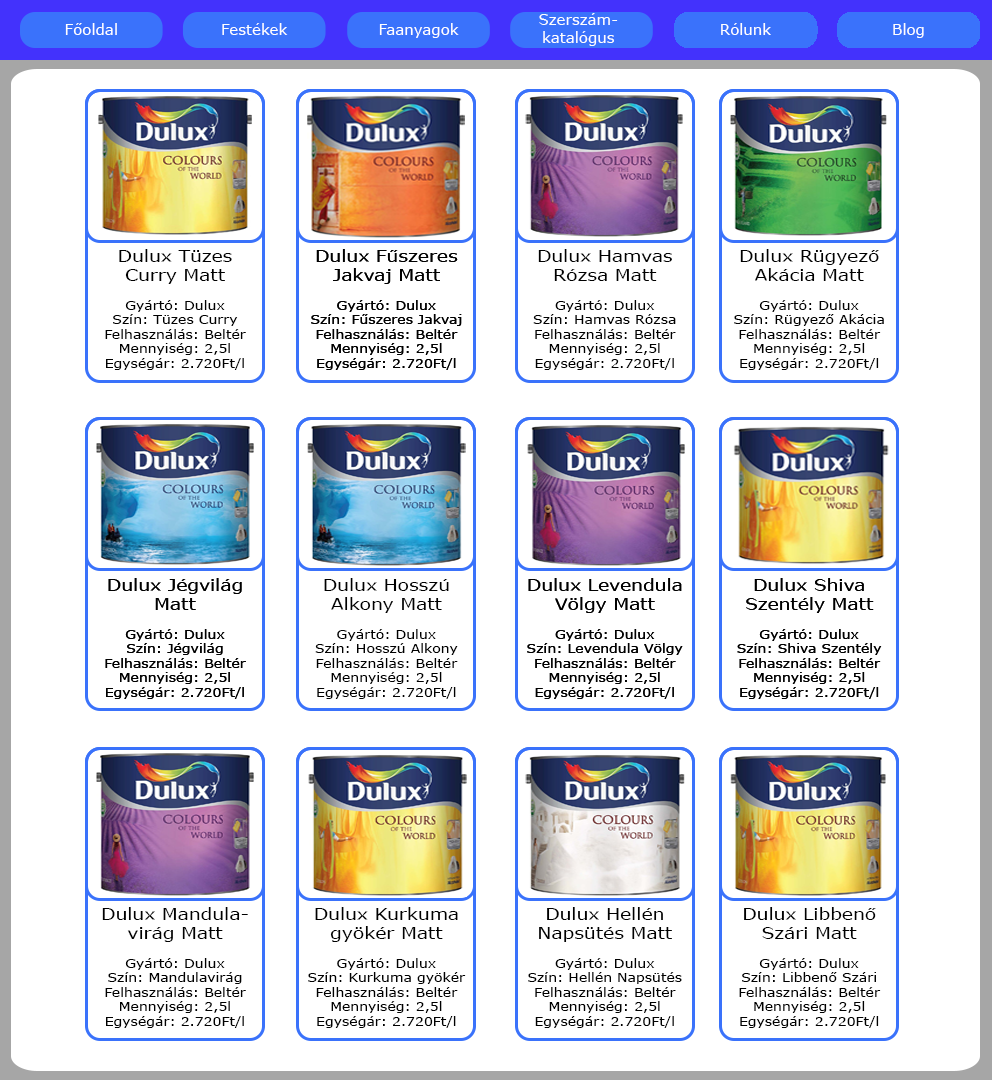
<style>
.page{position:relative;width:992px;height:1080px;background:#ffffff}
.page>*{position:absolute;margin:0}
.t1{font:12px "Verdana";color:#000000;scale:1.17 1}
.t2{font:16px "Verdana";color:#000000;scale:1.17 1}
</style>
<div class="page">
<p class="t1" style="left:105px;top:249px;width:141px;height:121px;text-align:center"><span class="t2">Dulux Tüzes Curry Matt<br></span><br>Gyártó: Dulux<br>Szín: Tüzes Curry<br>Felhasználás: Beltér<br>Mennyiség: 2,5l<br>Egységár: 2.720Ft/l</p>
<p class="t1" style="left:311px;top:249px;width:151px;height:121px;text-align:center"><span class="t2">Dulux Fűszeres Jakvaj Matt<br></span><br>Gyártó: Dulux<br>Szín: Fűszeres Jakvaj<br>Felhasználás: Beltér<br>Mennyiség: 2,5l<br>Egységár: 2.720Ft/l</p>
<p class="t1" style="left:311px;top:249px;width:151px;height:121px;text-align:center"><span class="t2">Dulux Fűszeres Jakvaj Matt<br></span><br>Gyártó: Dulux<br>Szín: Fűszeres Jakvaj<br>Felhasználás: Beltér<br>Mennyiség: 2,5l<br>Egységár: 2.720Ft/l</p>
<p class="t1" style="left:533px;top:249px;width:143px;height:121px;text-align:center"><span class="t2">Dulux Hamvas Rózsa Matt<br></span><br>Gyártó: Dulux<br>Szín: Hamvas Rózsa<br>Felhasználás: Beltér<br>Mennyiség: 2,5l<br>Egységár: 2.720Ft/l</p>
<p class="t1" style="left:734px;top:249px;width:150px;height:121px;text-align:center"><span class="t2">Dulux Rügyező Akácia Matt<br></span><br>Gyártó: Dulux<br>Szín: Rügyező Akácia<br>Felhasználás: Beltér<br>Mennyiség: 2,5l<br>Egységár: 2.720Ft/l</p>
<p class="t1" style="left:105px;top:578px;width:141px;height:121px;text-align:center"><span class="t2">Dulux Jégvilág Matt<br></span><br>Gyártó: Dulux<br>Szín: Jégvilág<br>Felhasználás: Beltér<br>Mennyiség: 2,5l<br>Egységár: 2.720Ft/l</p>
<p class="t1" style="left:105px;top:578px;width:141px;height:121px;text-align:center"><span class="t2">Dulux Jégvilág Matt<br></span><br>Gyártó: Dulux<br>Szín: Jégvilág<br>Felhasználás: Beltér<br>Mennyiség: 2,5l<br>Egységár: 2.720Ft/l</p>
<p class="t1" style="left:315px;top:578px;width:143px;height:121px;text-align:center"><span class="t2">Dulux Hosszú Alkony Matt<br></span><br>Gyártó: Dulux<br>Szín: Hosszú Alkony<br>Felhasználás: Beltér<br>Mennyiség: 2,5l<br>Egységár: 2.720Ft/l</p>
<p class="t1" style="left:527px;top:578px;width:156px;height:121px;text-align:center"><span class="t2">Dulux Levendula Völgy Matt<br></span><br>Gyártó: Dulux<br>Szín: Levendula Völgy<br>Felhasználás: Beltér<br>Mennyiség: 2,5l<br>Egységár: 2.720Ft/l</p>
<p class="t1" style="left:527px;top:578px;width:156px;height:121px;text-align:center"><span class="t2">Dulux Levendula Völgy Matt<br></span><br>Gyártó: Dulux<br>Szín: Levendula Völgy<br>Felhasználás: Beltér<br>Mennyiség: 2,5l<br>Egységár: 2.720Ft/l</p>
<p class="t1" style="left:737px;top:578px;width:145px;height:121px;text-align:center"><span class="t2">Dulux Shiva Szentély Matt<br></span><br>Gyártó: Dulux<br>Szín: Shiva Szentély<br>Felhasználás: Beltér<br>Mennyiség: 2,5l<br>Egységár: 2.720Ft/l</p>
<p class="t1" style="left:737px;top:578px;width:145px;height:121px;text-align:center"><span class="t2">Dulux Shiva Szentély Matt<br></span><br>Gyártó: Dulux<br>Szín: Shiva Szentély<br>Felhasználás: Beltér<br>Mennyiség: 2,5l<br>Egységár: 2.720Ft/l</p>
<p class="t1" style="left:102px;top:907px;width:146px;height:121px;text-align:center"><span class="t2">Dulux Mandula-<br>virág Matt<br></span><br>Gyártó: Dulux<br>Szín: Mandulavirág<br>Felhasználás: Beltér<br>Mennyiség: 2,5l<br>Egységár: 2.720Ft/l</p>
<p class="t1" style="left:308px;top:907px;width:158px;height:121px;text-align:center"><span class="t2">Dulux Kurkuma gyökér Matt<br></span><br>Gyártó: Dulux<br>Szín: Kurkuma gyökér<br>Felhasználás: Beltér<br>Mennyiség: 2,5l<br>Egységár: 2.720Ft/l</p>
<p class="t1" style="left:528px;top:907px;width:154px;height:121px;text-align:center"><span class="t2">Dulux Hellén Napsütés Matt<br></span><br>Gyártó: Dulux<br>Szín: Hellén Napsütés<br>Felhasználás: Beltér<br>Mennyiség: 2,5l<br>Egységár: 2.720Ft/l</p>
<p class="t1" style="left:739px;top:907px;width:142px;height:121px;text-align:center"><span class="t2">Dulux Libbenő Szári Matt<br></span><br>Gyártó: Dulux<br>Szín: Libbenő Szári<br>Felhasználás: Beltér<br>Mennyiség: 2,5l<br>Egységár: 2.720Ft/l</p>
</div>
